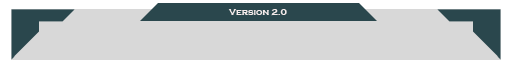
<style>
.page{position:relative;width:511px;height:60px;background:#d8d8d8}
.page>*{position:absolute;margin:0}
.t1{font:9px "CopperplateGothic-Bold";color:#f3eaea}
</style>
<div class="page">
<p class="t1" style="left:228px;top:9px;width:59px;height:7px">Version 2.0</p>
</div>
